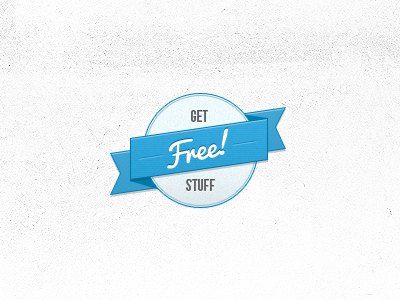
<style>
.page{position:relative;width:400px;height:300px}
.page>*{position:absolute;margin:0}
.t1{font:16px "BebasNeue";color:#636363;text-transform:uppercase}
.t2{font:27.4px "Pacifico";color:#ffffff;scale:1.05 1}
</style>
<div class="page">
<p class="t1" style="left:191px;top:110px;width:17px;height:12px">Get</p>
<p class="t2" style="left:167px;top:128px;width:61px;height:41px;rotate:-12deg">Free!</p>
<p class="t1" style="left:186px;top:179px;width:29px;height:12px">stuff</p>
</div>
